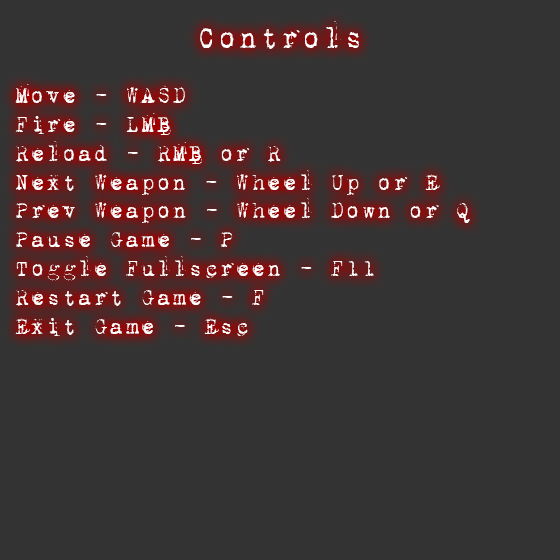
<style>
.page{position:relative;width:560px;height:560px;background:#333333}
.page>*{position:absolute;margin:0}
.t1{font:34.6px "1942report";color:#ffffff;scale:0.94 1}
.t2{font:25.9px "1942report";color:#ffffff;scale:0.94 1}
</style>
<div class="page">
<p class="t1" style="left:200px;top:21px;width:159px;height:28px">Controls</p>
<p class="t2" style="left:15px;top:84px;width:455px;height:252px">Move - WASD<br>Fire - LMB<br>Reload - RMB or R<br>Next Weapon - Wheel Up or E<br>Prev Weapon - Wheel Down or Q<br>Pause Game - P<br>Toggle Fullscreen - F11<br>Restart Game - F<br>Exit Game - Esc</p>
</div>
